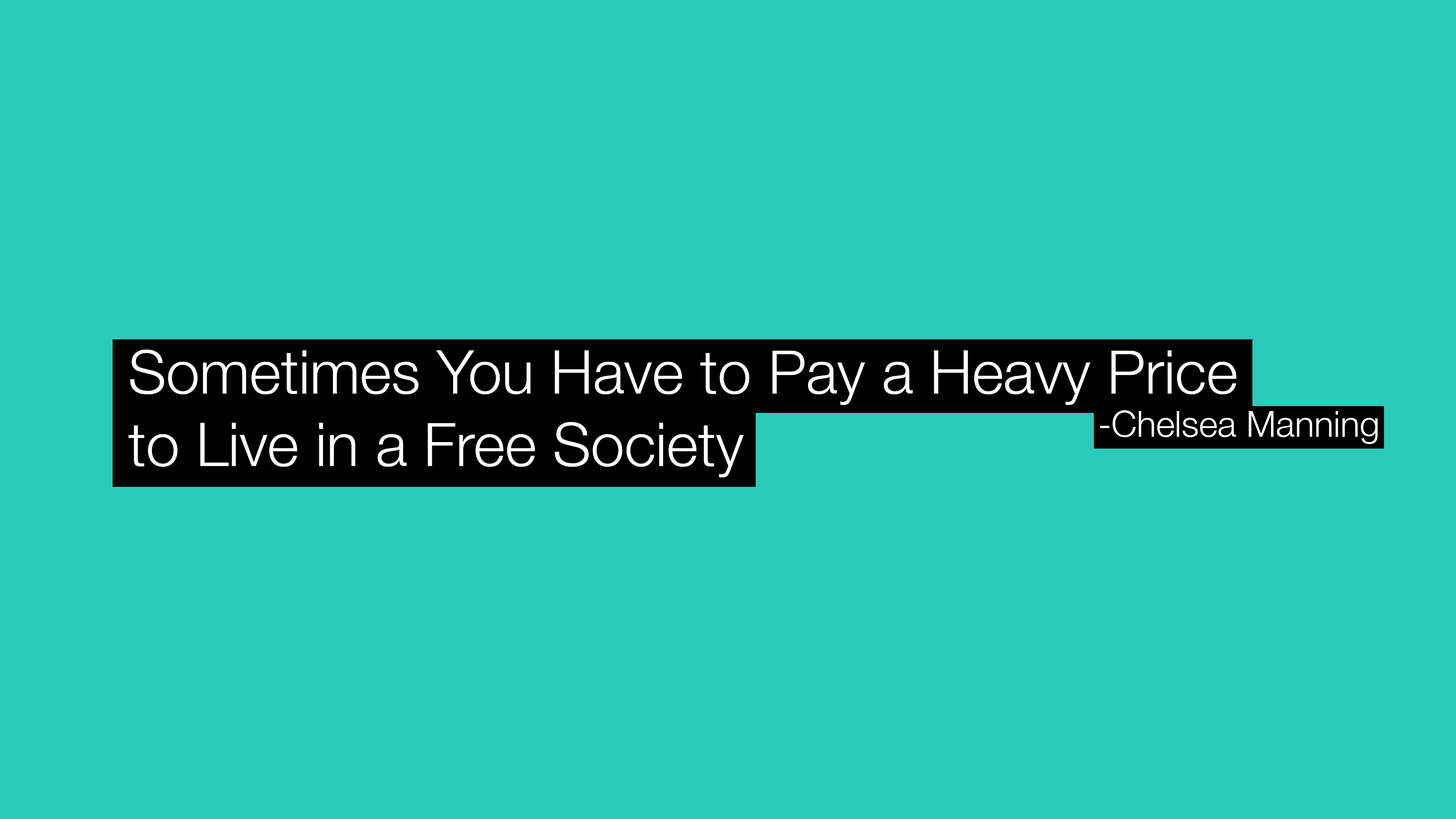
<style>
.page{position:relative;width:1456px;height:819px;background:#2bcbba}
.page>*{position:absolute;margin:0}
.t1{font:60.2px "HelveticaNeue-Light";color:#ffffff}
.t2{font:36.1px "HelveticaNeue-Light";color:#ffffff}
</style>
<div class="page">
<p class="t1" style="left:129px;top:350px;width:1107px;height:127px">Sometimes You Have to Pay a Heavy Price <br>to Live in a Free Society</p>
<p class="t2" style="left:1100px;top:410px;width:278px;height:34px">-Chelsea Manning</p>
</div>
